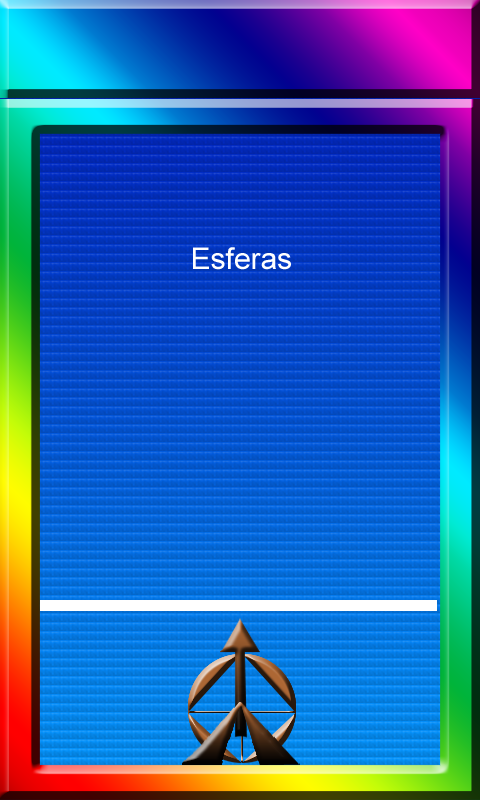
<style>
.page{position:relative;width:480px;height:800px}
.page>*{position:absolute;margin:0}
.t1{font:30px "ArialMT";color:#ffffff}
</style>
<div class="page">
<p class="t1" style="left:193px;top:247px;width:98px;height:23px">Esferas</p>
</div>
